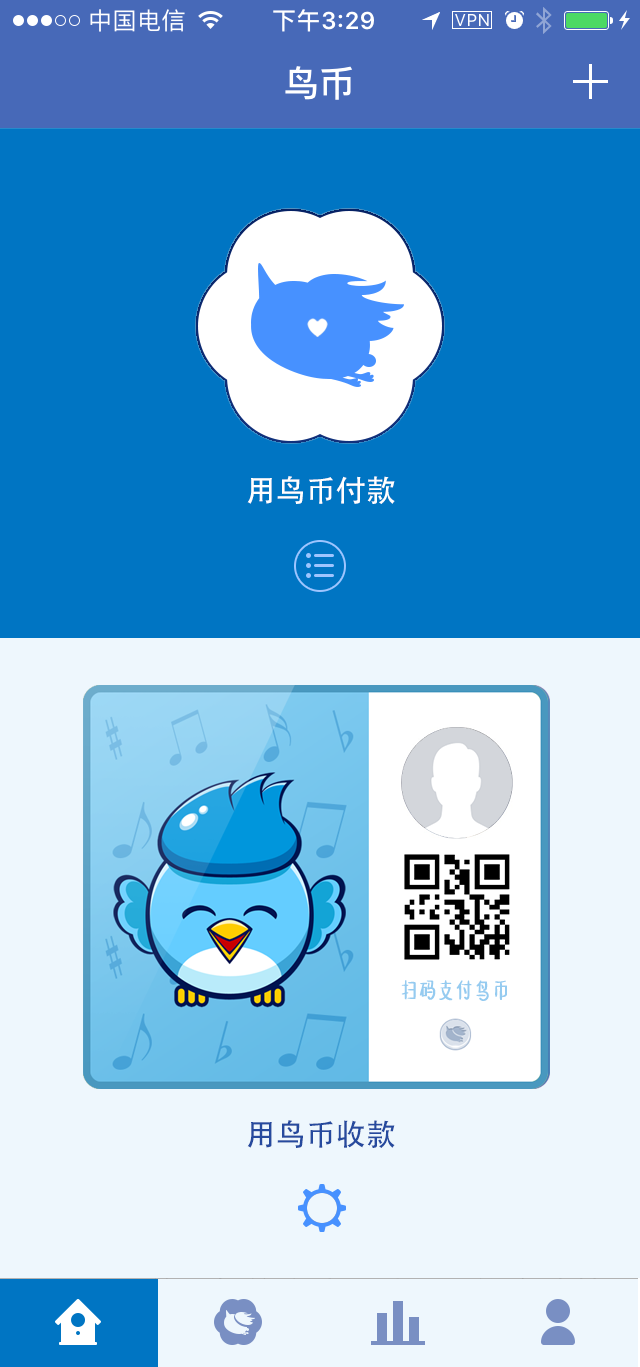
<style>
.page{position:relative;width:640px;height:1367px;background:#0075c3}
.page>*{position:absolute;margin:0}
.t1{font:30px "AdobeHeitiStd-Regular";color:#ffffff}
.t2{font:22.2px "HYMiaoHunTiW";color:#95cbf0;font-weight:bold}
.t3{font:30px "AdobeHeitiStd-Regular";color:#264a9e}
</style>
<div class="page">
<p class="t1" style="left:247px;top:476px;width:148px;height:28px">用鸟币付款</p>
<p class="t2" style="left:401px;top:980px;width:106px;height:21px">扫码支付鸟币</p>
<p class="t3" style="left:247px;top:1120px;width:148px;height:28px">用鸟币收款</p>
</div>
